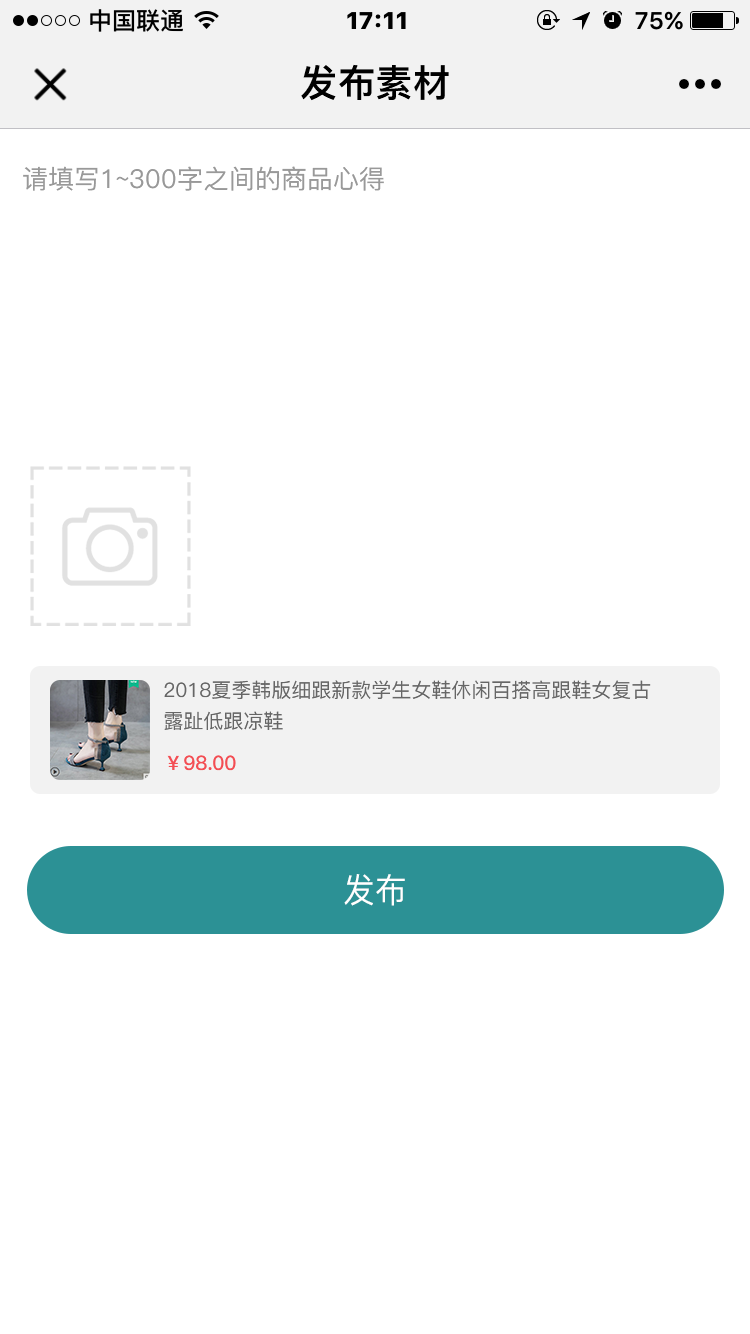
<style>
.page{position:relative;width:750px;height:1334px;background:#ffffff}
.page>*{position:absolute;margin:0}
.t1{font:37.6px "PingFang-SC-Heavy";color:#000000}
.t2{font:26px "PingFang-SC-Medium";color:#999999}
.t3{font:20px/31px "PingFang-SC-Medium";color:#666666}
.t4{font:20px "PingFang-SC-Bold";color:#f34e54}
.t5{font:34px "PingFang-SC-Medium";color:#ffffff;scale:0.93 1}
</style>
<div class="page">
<p class="t1" style="left:301px;top:64px;width:148px;height:37px">发布素材</p>
<p class="t2" style="left:23px;top:166px;width:361px;height:25px">请填写1~300字之间的商品心得</p>
<p class="t3" style="left:164px;top:680px;width:487px;height:50px">2018夏季韩版细跟新款学生女鞋休闲百搭高跟鞋女复古露趾低跟凉鞋</p>
<p class="t4" style="left:167px;top:755px;width:69px;height:16px">￥98.00</p>
<p class="t5" style="left:344px;top:874px;width:61px;height:32px">发布</p>
</div>
